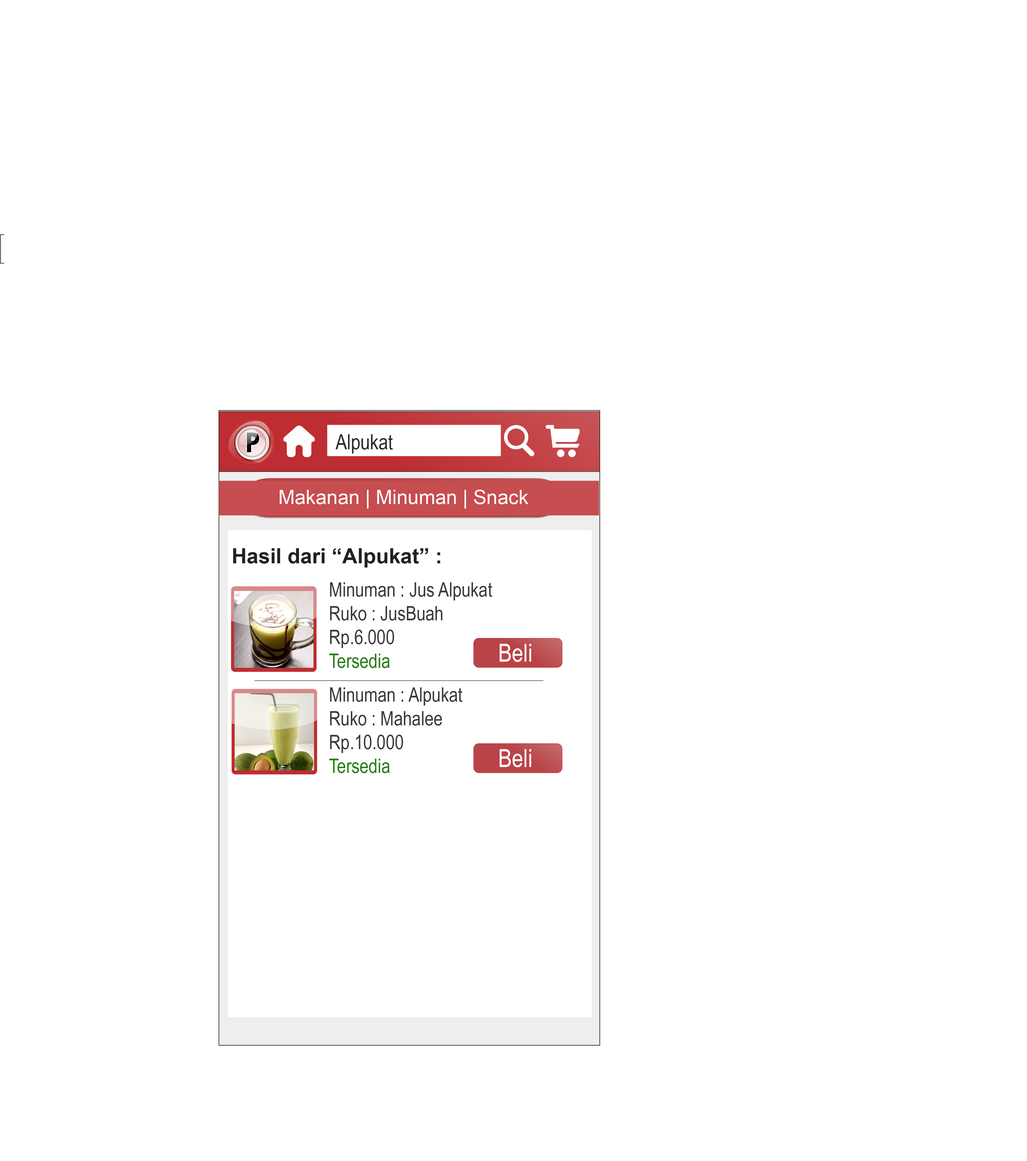
<style>
.page{position:relative;width:1027px;height:1161px;background:#ffffff}
.page>*{position:absolute;margin:0}
.t1{font:21px "ArialNarrow";color:#2a2a2a}
.t2{font:19.8px "ArialMT";color:#fffefe}
.t3{font:21px "Arial-BoldMT";color:#212121}
.t4{font:19.8px "ArialNarrow";color:#3a3a3a}
.t5{font:19.8px "ArialNarrow";color:#267d15}
.t6{font:25.1px "ArialNarrow";color:#ffffff}
</style>
<div class="page">
<p class="t1" style="left:336px;top:434px;width:57px;height:19px">Alpukat</p>
<p class="t2" style="left:280px;top:490px;width:249px;height:19px">Makanan | Minuman | Snack</p>
<p class="t3" style="left:233px;top:548px;width:207px;height:19px">Hasil dari “Alpukat” :</p>
<p class="t4" style="left:329px;top:582px;width:163px;height:86px">Minuman : Jus Alpukat<br>Ruko : JusBuah<br>Rp.6.000<br><span class="t5">Tersedia</span></p>
<p class="t6" style="left:500px;top:644px;width:31px;height:18px">Beli</p>
<p class="t4" style="left:329px;top:687px;width:133px;height:86px">Minuman : Alpukat<br>Ruko : Mahalee<br>Rp.10.000<br><span class="t5">Tersedia</span></p>
<p class="t6" style="left:500px;top:749px;width:31px;height:18px">Beli</p>
</div>
